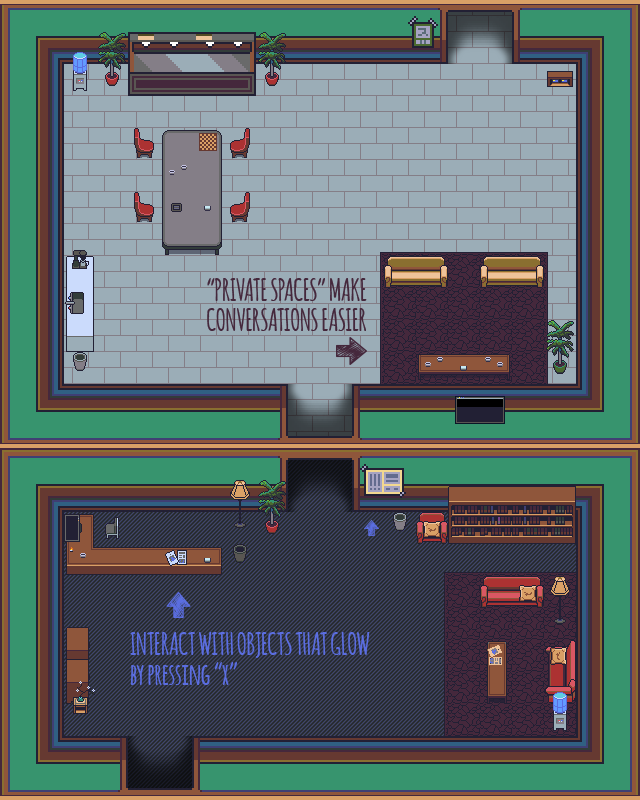
<style>
.page{position:relative;width:640px;height:800px;background:#9badb7}
.page>*{position:absolute;margin:0}
.t1{font:30px/30px "Amatic-Bold";color:#45283c}
.t2{font:30px/30px "Amatic-Bold";color:#5b6ee1}
</style>
<div class="page">
<p class="t1" style="left:207px;top:278px;width:160px;height:53px;text-align:right">“PRIVATE SPACES” MAKE<br>CONVERSATIONS EASIER</p>
<p class="t2" style="left:130px;top:632px;width:240px;height:53px">INTERACT WITH OBJECTS THAT GLOW<br>by pressing “x”</p>
</div>
